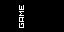
<style>
.page{position:relative;width:64px;height:32px;background:#000000}
.page>*{position:absolute;margin:0}
.t1{font:10.4px "5*5";color:#ffffff;text-transform:uppercase}
</style>
<div class="page">
<p class="t1" style="left:19px;top:5px;width:5px;height:23px;rotate:-90deg">Game</p>
<p class="t1" style="left:19px;top:17px;width:5px;height:11px;rotate:-90deg">Ga</p>
<p class="t1" style="left:19px;top:11px;width:5px;height:17px;rotate:-90deg">Gam</p>
<p class="t1" style="left:19px;top:23px;width:5px;height:5px;rotate:-90deg">G</p>
</div>
